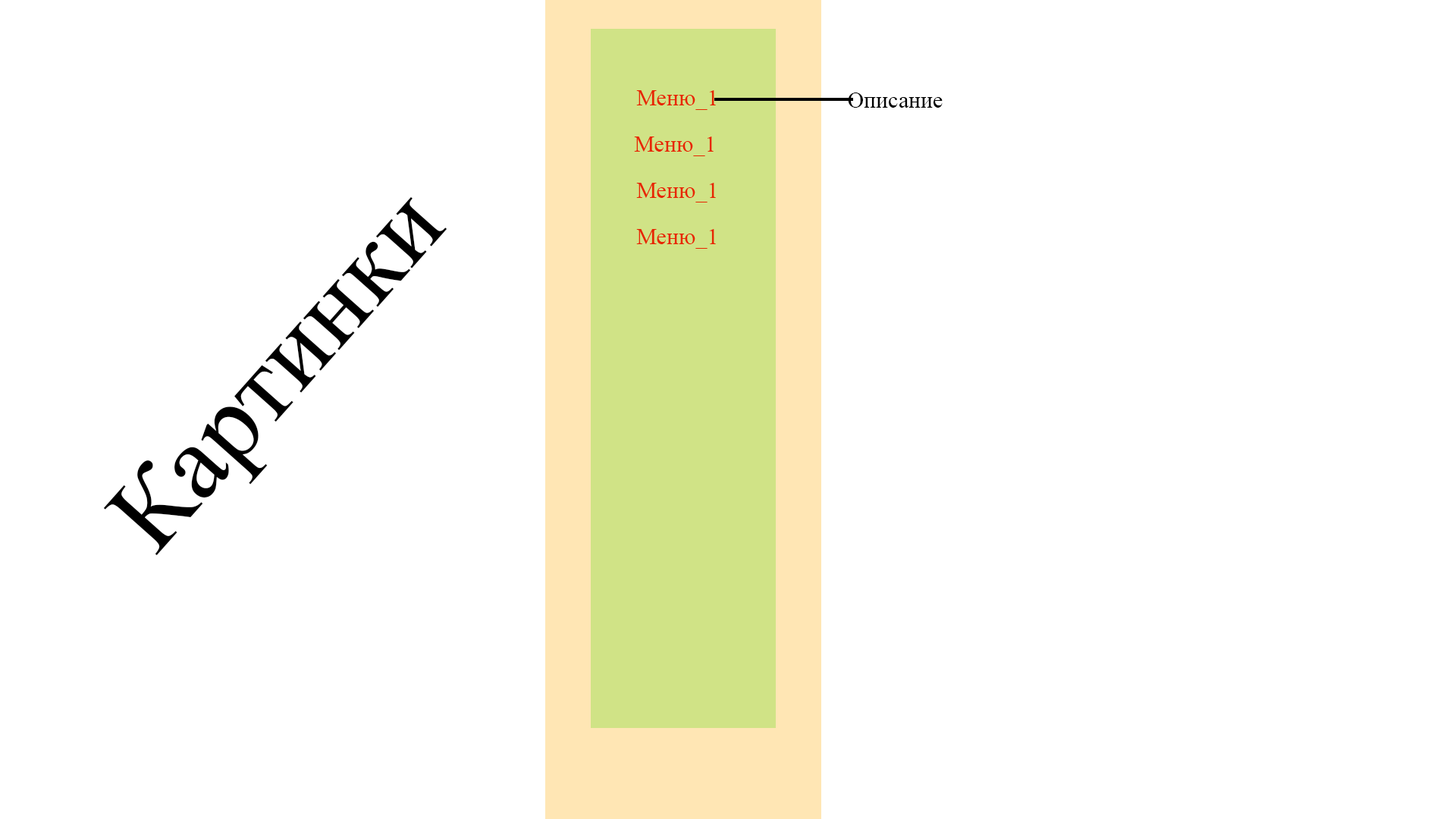
<style>
.page{position:relative;width:1456px;height:819px;background:#ffffff}
.page>*{position:absolute;margin:0}
.t1{font:22.7px "TimesNewRomanPSMT";color:#e72600}
.t2{font:22.7px "TimesNewRomanPSMT";color:#000000}
.t3{font:107.2px "TimesNewRomanPSMT";color:#000000}
</style>
<div class="page">
<p class="t1" style="left:636px;top:90px;width:80px;height:20px">Меню_1</p>
<p class="t2" style="left:848px;top:93px;width:95px;height:15px">Описание</p>
<p class="t1" style="left:634px;top:136px;width:80px;height:20px">Меню_1</p>
<p class="t1" style="left:636px;top:183px;width:80px;height:19px">Меню_1</p>
<p class="t3" style="left:103px;top:196px;width:344px;height:360px;rotate:-48deg">Картинки</p>
<p class="t1" style="left:636px;top:229px;width:80px;height:20px">Меню_1</p>
</div>
